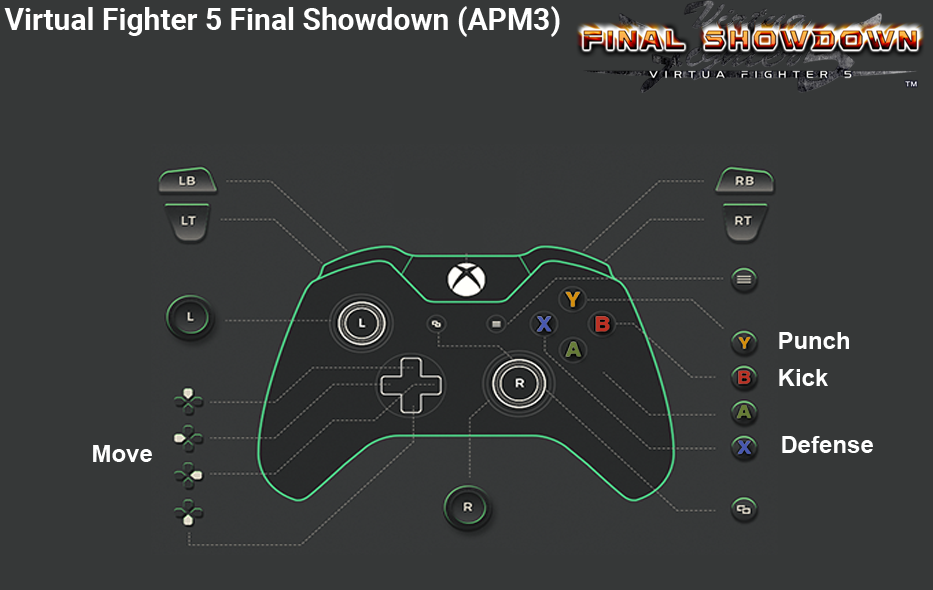
<style>
.page{position:relative;width:933px;height:590px;background:#363838}
.page>*{position:absolute;margin:0}
.t1{font:30px "Roboto-Bold";color:#ffffff}
.t2{font:24px "Arial-BoldMT";color:#fefefe}
</style>
<div class="page">
<p class="t1" style="left:4px;top:6px;width:556px;height:31px">Virtual Fighter 5 Final Showdown (APM3)</p>
<p class="t2" style="left:779px;top:332px;width:70px;height:17px">Punch</p>
<p class="t2" style="left:779px;top:369px;width:49px;height:17px">Kick</p>
<p class="t2" style="left:782px;top:436px;width:91px;height:17px">Defense</p>
<p class="t2" style="left:93px;top:445px;width:59px;height:17px">Move</p>
</div>
